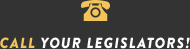
<style>
.page{position:relative;width:190px;height:49px;background:#333333}
.page>*{position:absolute;margin:0}
.t1{font:14.6px "BrandonGrotesque-BlackItalic";letter-spacing:0.085em;color:#ffffff}
.t2{font:14.6px "BrandonGrotesque-BlackItalic";letter-spacing:0.085em;color:#f2c45a}
</style>
<div class="page">
<p class="t1" style="left:0px;top:37px;width:190px;height:12px"><span class="t2">CALL </span>YOUR LEGISLATORS!</p>
</div>
